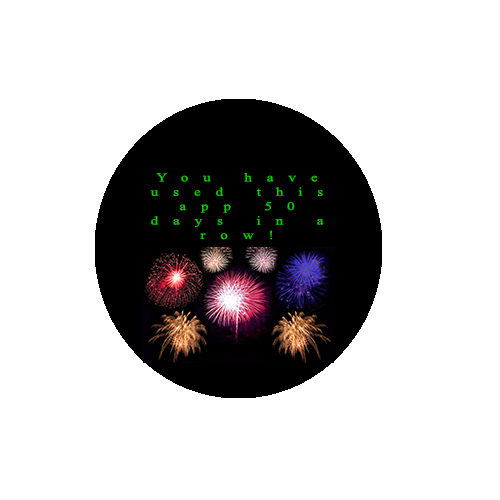
<style>
.page{position:relative;width:500px;height:500px;background:#ffffff}
.page>*{position:absolute;margin:0}
.t1{font:12px "TimesNewRomanPSMT";letter-spacing:0.985em;color:#05cd00;scale:1.26 1}
</style>
<div class="page">
<p class="t1" style="left:150px;top:173px;width:174px;height:67px;text-align:center">You have used this app 50 days in a row!</p>
</div>
